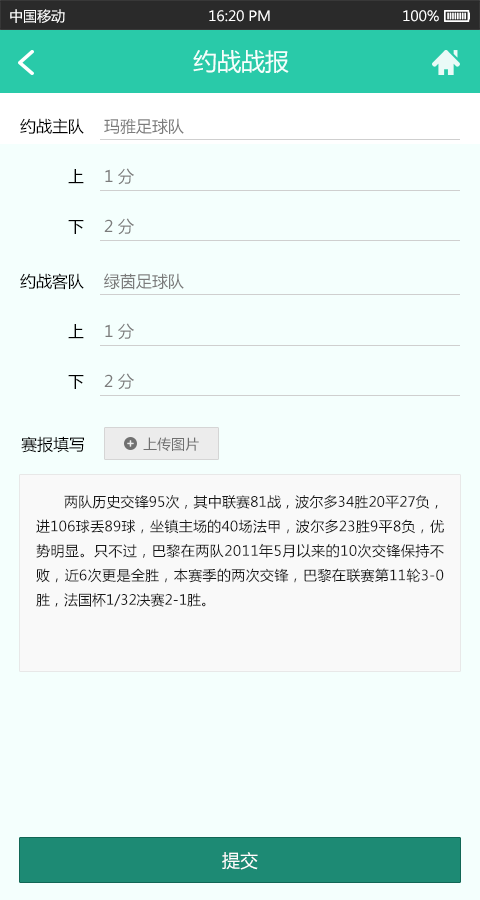
<style>
.page{position:relative;width:480px;height:900px;background:#f4fffd}
.page>*{position:absolute;margin:0}
.t1{font:14px "MicrosoftYaHei";color:#ffffff}
.t2{font:24px "MicrosoftYaHei";color:#f4fffd}
.t3{font:16px/50px "MicrosoftYaHei";color:#000000}
.t4{font:16px "MicrosoftYaHei";color:#7b7b7b}
.t5{font:16px "MicrosoftYaHei";color:#000000}
.t6{font:14px "MicrosoftYaHei";color:#707070}
.t7{font:14px "MicrosoftYaHei";color:#191919}
.t8{font:18px "MicrosoftYaHei";color:#ffffff}
</style>
<div class="page">
<p class="t1" style="left:10px;top:9px;width:55px;height:14px">中国移动</p>
<p class="t1" style="left:209px;top:10px;width:61px;height:12px">16:20 PM</p>
<p class="t1" style="left:403px;top:10px;width:36px;height:12px">100%</p>
<p class="t2" style="left:193px;top:50px;width:96px;height:23px">约战战报</p>
<p class="t3" style="left:20px;top:118px;width:64px;height:116px;text-align:right">约战主队<br>上<br>下</p>
<p class="t4" style="left:104px;top:118px;width:80px;height:16px">玛雅足球队</p>
<p class="t4" style="left:105px;top:168px;width:29px;height:17px">1 分</p>
<p class="t4" style="left:104px;top:218px;width:30px;height:17px">2 分</p>
<p class="t3" style="left:20px;top:273px;width:64px;height:116px;text-align:right">约战客队<br>上<br>下</p>
<p class="t4" style="left:104px;top:273px;width:80px;height:17px">绿茵足球队</p>
<p class="t4" style="left:105px;top:323px;width:29px;height:17px">1 分</p>
<p class="t4" style="left:104px;top:373px;width:30px;height:17px">2 分</p>
<p class="t5" style="left:21px;top:436px;width:63px;height:17px">赛报填写</p>
<p class="t6" style="left:143px;top:437px;width:56px;height:14px">上传图片</p>
<p class="t7" style="left:36px;top:495px;width:408px;height:112px;text-align:justify">两队历史交锋95次，其中联赛81战，波尔多34胜20平27负，进106球丢89球，坐镇主场的40场法甲，波尔多23胜9平8负，优势明显。只不过，巴黎在两队2011年5月以来的10次交锋保持不败，近6次更是全胜，本赛季的两次交锋，巴黎在联赛第11轮3-0胜，法国杯1/32决赛2-1胜。</p>
<p class="t8" style="left:222px;top:852px;width:36px;height:18px">提交</p>
</div>
